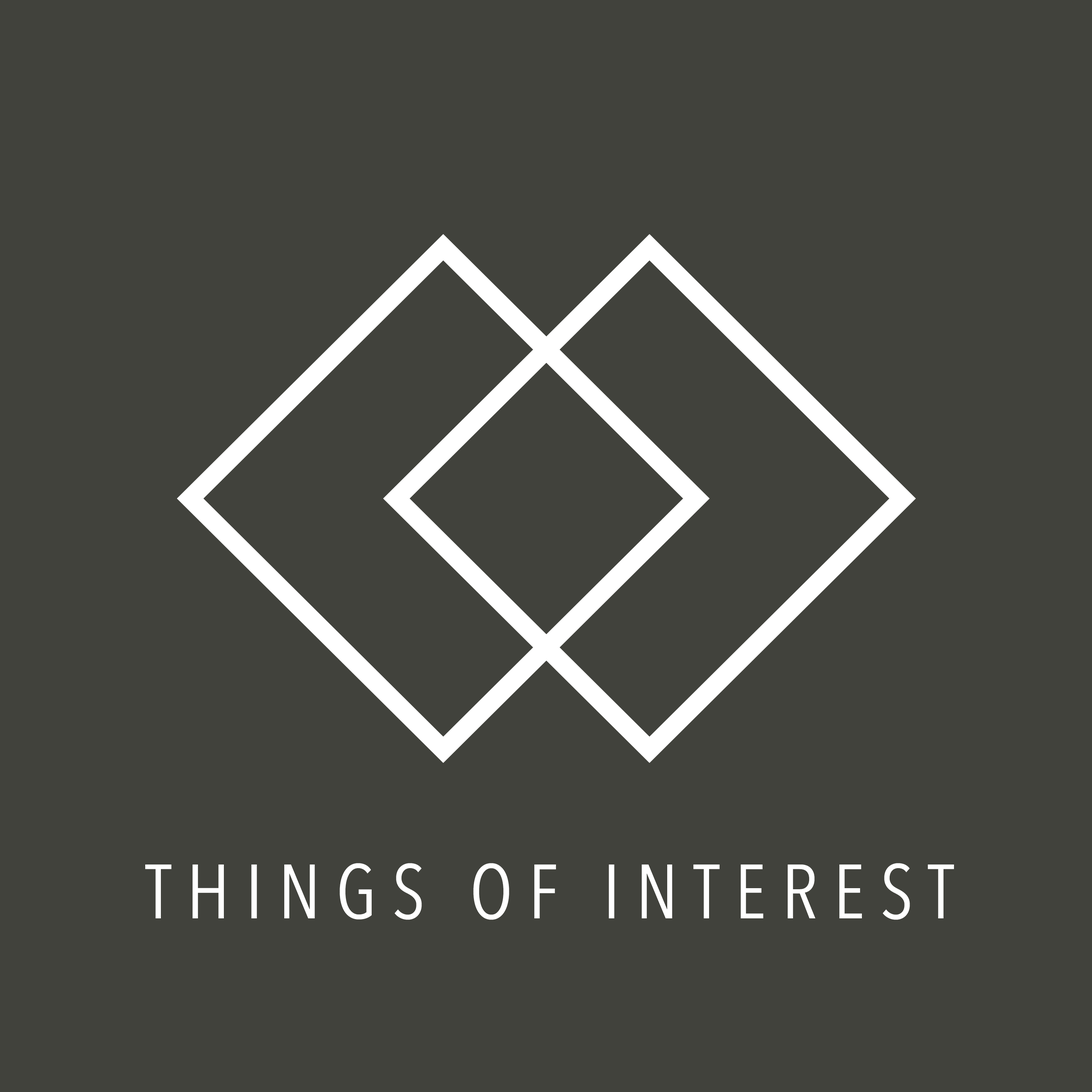
<style>
.page{position:relative;width:1092px;height:1092px;background:#41423c}
.page>*{position:absolute;margin:0}
.t1{font:76.1px "AvenirNextCondensed-Regular";letter-spacing:0.2em;color:#ffffff}
</style>
<div class="page">
<p class="t1" style="left:145px;top:863px;width:809px;height:57px">THINGS OF INTEREST</p>
</div>
